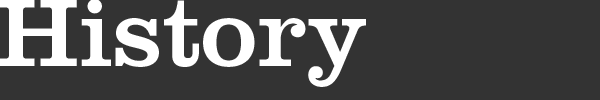
<style>
.page{position:relative;width:600px;height:100px;background:#333333}
.page>*{position:absolute;margin:0}
.t1{font:100px "ClarendonLT";color:#ffffff}
</style>
<div class="page">
<p class="t1" style="left:0px;top:0px;width:366px;height:87px">History</p>
</div>
